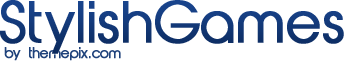
<style>
.page{position:relative;width:360px;height:66px;background:#ffffff}
.page>*{position:absolute;margin:0}
.t1{font:53px "AbeatbyKai";color:#133877;font-weight:bold}
.t2{font:13px "AbeatbyKai";color:#1f427b;font-weight:bold}
</style>
<div class="page">
<p class="t1" style="left:0px;top:0px;width:344px;height:54px">StylishGames</p>
<p class="t2" style="left:4px;top:47px;width:117px;height:14px">by themepix.com</p>
</div>
